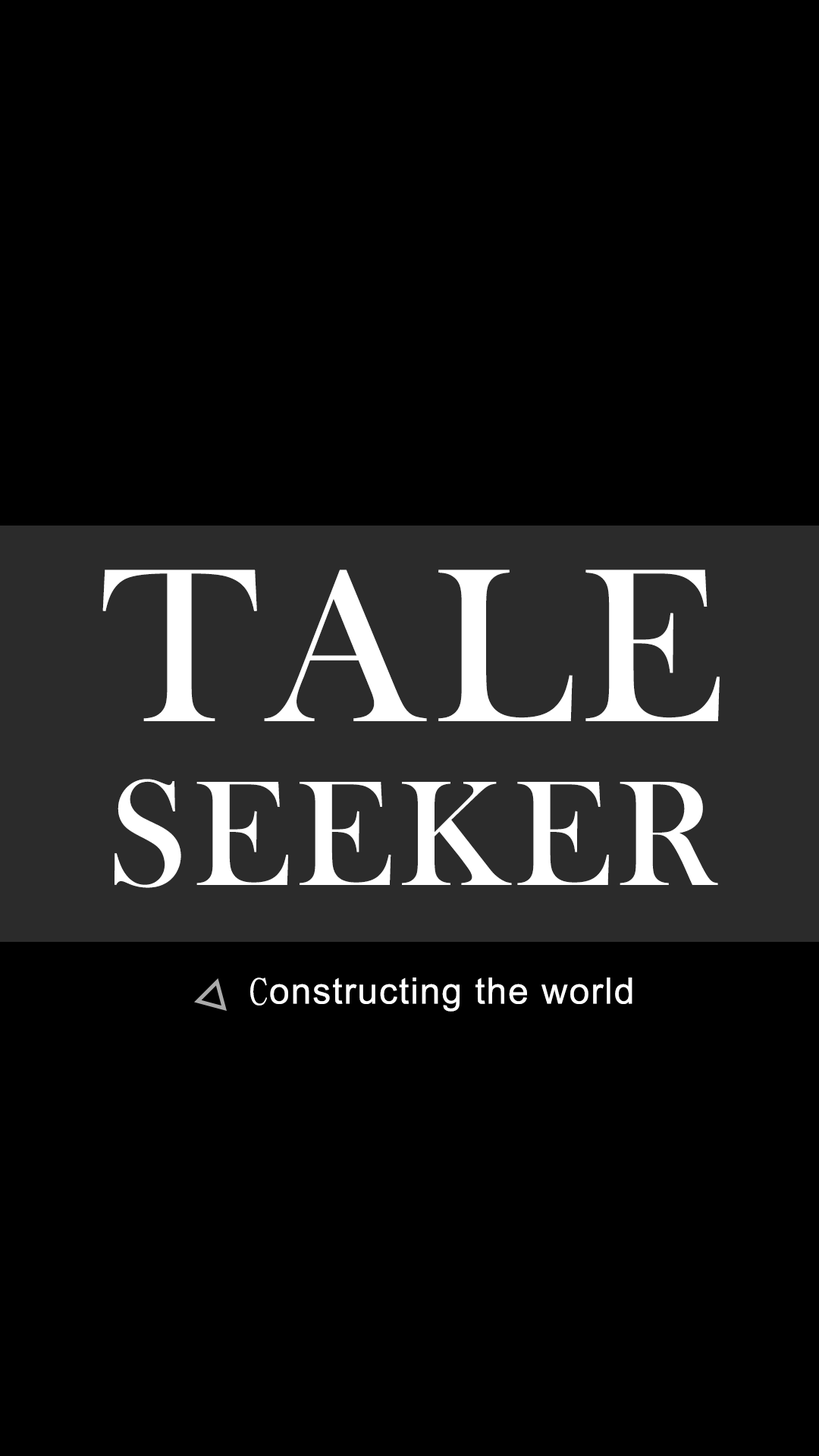
<style>
.page{position:relative;width:819px;height:1456px;background:#000000}
.page>*{position:absolute;margin:0}
.t1{font:154.6px/188.5px "BaskOldFace";letter-spacing:0.04em;color:#ffffff;text-transform:uppercase}
.t2{font:226.7px/224px "BaskOldFace";letter-spacing:0.04em;color:#ffffff;text-transform:uppercase}
.t3{font:36.4px "ArialMT";letter-spacing:0.04em;color:#ffffff}
.t4{font:36.4px "DFKaiShu-SB-Estd-BF";letter-spacing:0.04em;color:#ffffff}
</style>
<div class="page">
<p class="t1" style="left:102px;top:570px;width:618px;height:318px;text-align:center"><span class="t2">TALE<br></span>SEEKER</p>
<p class="t3" style="left:250px;top:977px;width:382px;height:35px"><span class="t4">C</span>onstructing the world</p>
</div>
